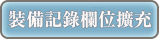
<style>
.page{position:relative;width:159px;height:39px}
.page>*{position:absolute;margin:0}
.t1{font:18px "RyuminPr6N-ExBold";color:#fff8f5}
</style>
<div class="page">
<p class="t1" style="left:8px;top:10px;width:144px;height:18px">裝備記錄欄位擴充</p>
</div>
